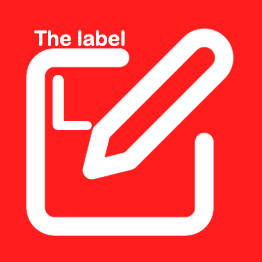
<style>
.page{position:relative;width:262px;height:262px;background:#ff1d1d}
.page>*{position:absolute;margin:0}
.t1{font:20.8px "ArialRoundedMTBold";color:#ffffff}
.t2{font:76.4px "ArialRoundedMTBold";color:#ffffff}
</style>
<div class="page">
<p class="t1" style="left:34px;top:30px;width:91px;height:16px">The label</p>
<p class="t2" style="left:52px;top:75px;width:40px;height:55px">L</p>
</div>
